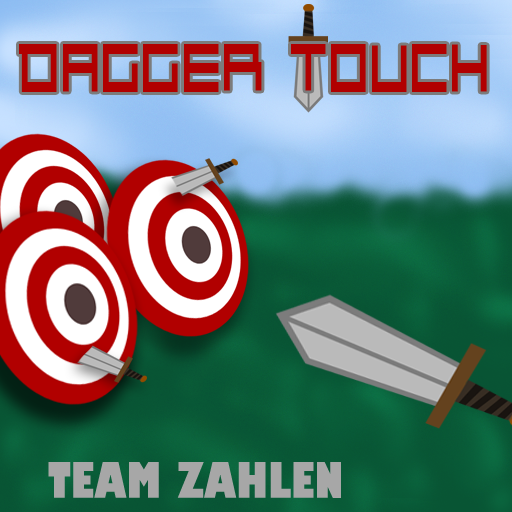
<style>
.page{position:relative;width:512px;height:512px}
.page>*{position:absolute;margin:0}
.t1{font:97.8px "Kunstware-Alphabet";color:#b10000;scale:0.49 1}
.t2{font:48px "GillSans-UltraBoldCondensed";color:#a7a7a7}
</style>
<div class="page">
<p class="t1" style="left:19px;top:44px;width:468px;height:48px">DAGGER TOUCH</p>
<p class="t2" style="left:48px;top:462px;width:293px;height:36px">TEAM ZAHLEN</p>
</div>
